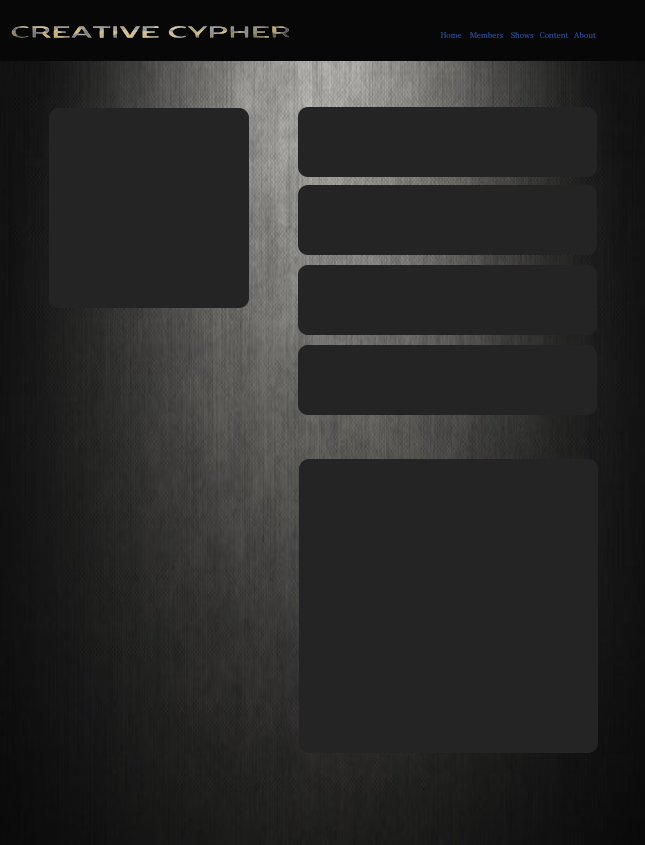
<style>
.page{position:relative;width:645px;height:845px;background:#242424}
.page>*{position:absolute;margin:0}
.t1{font:8px "PTSerif-Regular"}
.t2{font:8px "PTSerif-Regular";color:#2a4f99}
</style>
<div class="page">
<p class="t1" style="left:440px;top:32px;width:21px;height:6px">Home</p>
<p class="t1" style="left:470px;top:32px;width:33px;height:6px">Members</p>
<p class="t1" style="left:511px;top:32px;width:23px;height:6px">Shows</p>
<p class="t1" style="left:540px;top:32px;width:29px;height:6px">Content</p>
<p class="t2" style="left:574px;top:32px;width:22px;height:6px">About</p>
</div>
